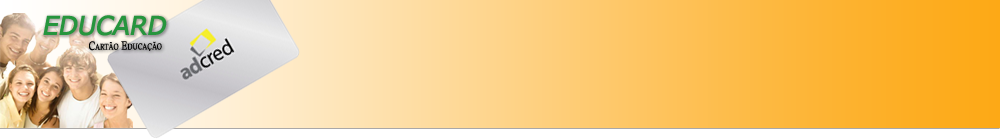
<style>
.page{position:relative;width:1000px;height:140px}
.page>*{position:absolute;margin:0}
.t1{font:25.6px "Tahoma";color:#26953d;font-variant:small-caps;font-weight:bold;font-style:italic;scale:1.05 1}
.t2{font:12px "CalistoMT";color:#000000;font-variant:small-caps;font-weight:bold;scale:0.74 1}
</style>
<div class="page">
<p class="t1" style="left:43px;top:15px;width:124px;height:21px">EDUCARD</p>
<p class="t2" style="left:89px;top:41px;width:73px;height:10px">Cartão Educação</p>
</div>
